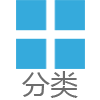
<style>
.page{position:relative;width:100px;height:100px;background:#ffffff}
.page>*{position:absolute;margin:0}
.t1{font:27.8px "MicrosoftYaHei";color:#6d6d6d}
</style>
<div class="page">
<p class="t1" style="left:22px;top:71px;width:56px;height:27px">分类</p>
</div>
